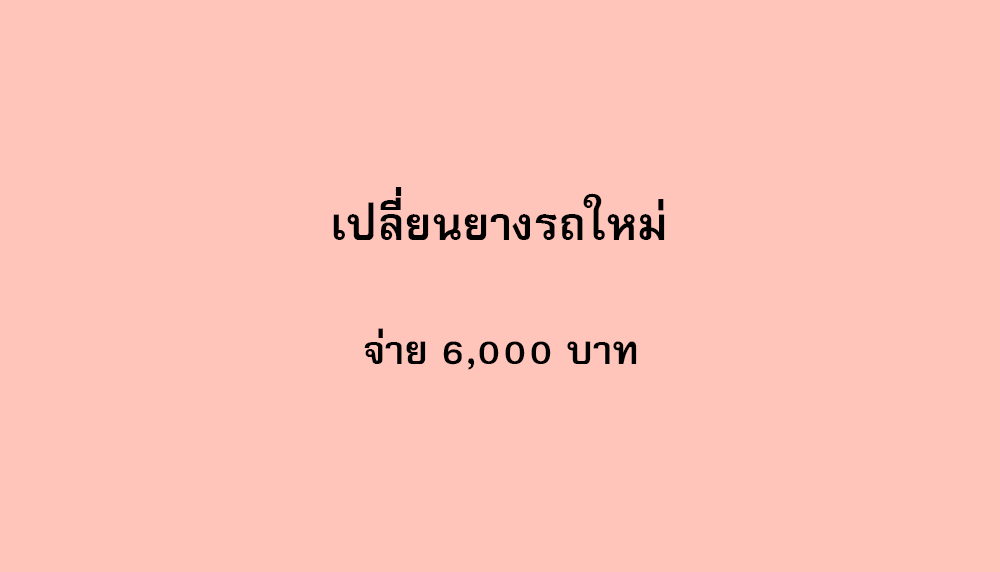
<style>
.page{position:relative;width:1000px;height:572px;background:#ffc4ba}
.page>*{position:absolute;margin:0}
.t1{font:64px "FreesiaUPCBold";color:#000000}
.t2{font:56px "FreesiaUPCBold";color:#000000}
</style>
<div class="page">
<p class="t1" style="left:333px;top:187px;width:332px;height:53px">เปลี่ยนยางรถใหม่</p>
<p class="t2" style="left:364px;top:328px;width:273px;height:42px">จ่าย 6,000 บาท</p>
</div>
